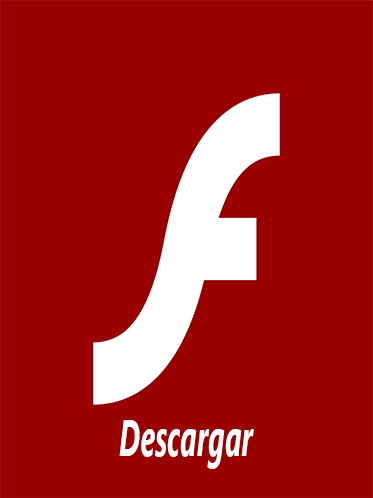
<style>
.page{position:relative;width:373px;height:498px;background:#990000}
.page>*{position:absolute;margin:0}
.t1{font:50.7px "SegoeUI-BoldItalic";color:#ffffff;scale:0.56 1}
</style>
<div class="page">
<p class="t1" style="left:119px;top:420px;width:135px;height:49px">Descargar</p>
</div>
